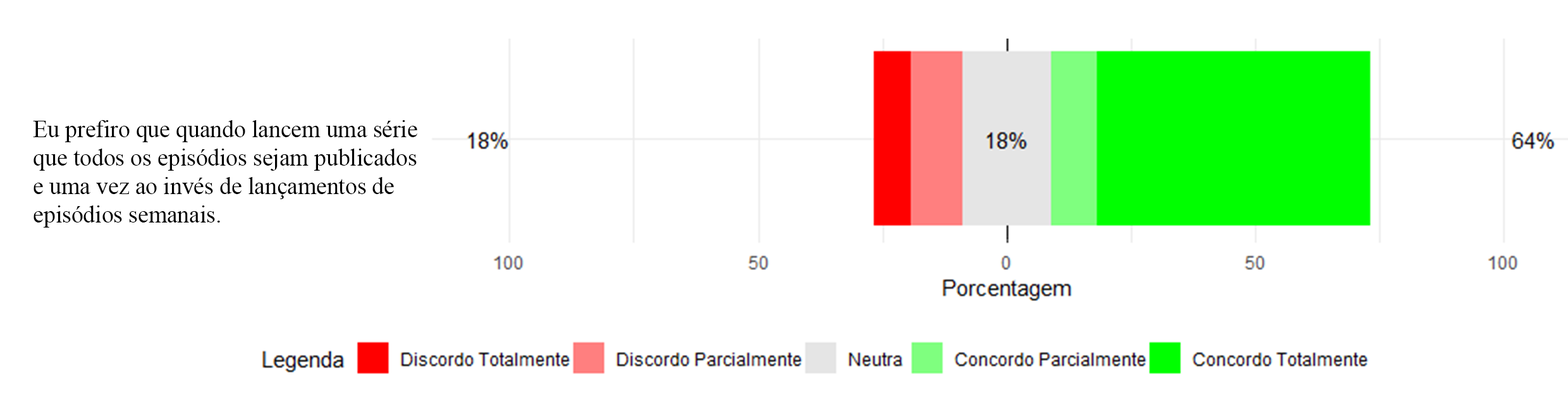
<style>
.page{position:relative;width:1568px;height:397px;background:#ffffff}
.page>*{position:absolute;margin:0}
.t1{font:23.7px "TimesNewRomanPSMT";color:#000000}
</style>
<div class="page">
<p class="t1" style="left:33px;top:120px;width:384px;height:108px">Eu prefiro que quando lancem uma série<br>que todos os episódios sejam publicados<br>e uma vez ao invés de lançamentos de <br>episódios semanais.</p>
</div>
